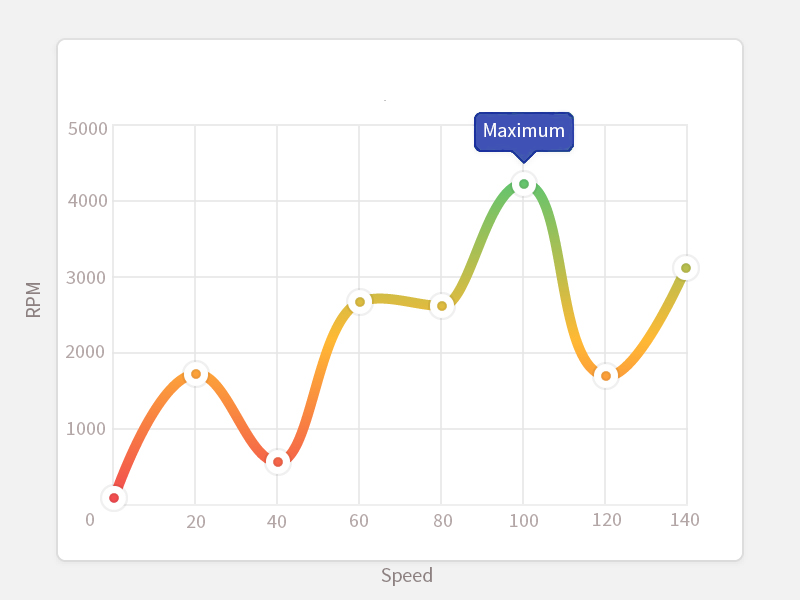
<style>
.page{position:relative;width:800px;height:600px;background:#ffffff}
.page>*{position:absolute;margin:0}
.t1{font:20px "SourceSansPro-Regular";color:#b3a6a6}
.t2{font:20px "SourceSansPro-Regular";color:#ffffff}
.t3{font:20.8px "SourceSansPro-Regular";color:#8d8181;scale:0.95 1}
.t4{font:20px "SourceSansPro-Regular";color:#8d8181}
</style>
<div class="page">
<p class="t1" style="left:68px;top:122px;width:39px;height:13px">5000</p>
<p class="t2" style="left:484px;top:123px;width:80px;height:14px">Maximum</p>
<p class="t1" style="left:68px;top:194px;width:39px;height:13px">4000</p>
<p class="t1" style="left:66px;top:271px;width:39px;height:13px">3000</p>
<p class="t3" style="left:26px;top:283px;width:14px;height:34px;rotate:-90deg">RPM</p>
<p class="t1" style="left:66px;top:345px;width:38px;height:13px">2000</p>
<p class="t1" style="left:67px;top:422px;width:38px;height:13px">1000</p>
<p class="t1" style="left:86px;top:513px;width:8px;height:13px">0</p>
<p class="t1" style="left:187px;top:515px;width:18px;height:13px">20</p>
<p class="t1" style="left:267px;top:515px;width:19px;height:13px">40</p>
<p class="t1" style="left:350px;top:514px;width:18px;height:13px">60</p>
<p class="t1" style="left:434px;top:514px;width:18px;height:13px">80</p>
<p class="t1" style="left:510px;top:514px;width:28px;height:13px">100</p>
<p class="t1" style="left:593px;top:513px;width:28px;height:13px">120</p>
<p class="t1" style="left:671px;top:513px;width:28px;height:13px">140</p>
<p class="t4" style="left:381px;top:567px;width:51px;height:19px">Speed</p>
</div>
